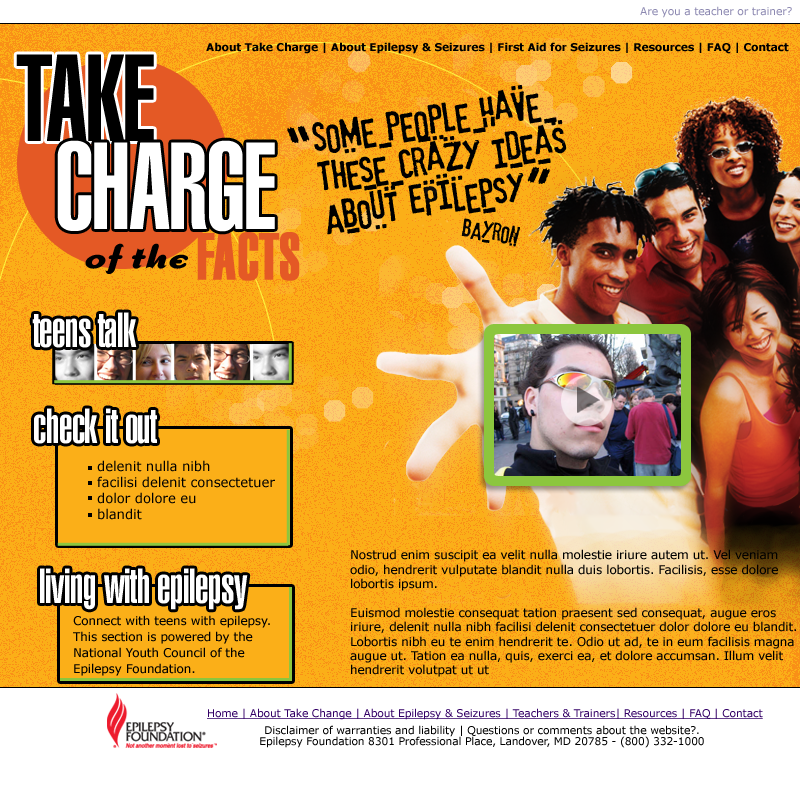
<style>
.page{position:relative;width:800px;height:806px;background:#fbaf18}
.page>*{position:absolute;margin:0}
.t1{font:10.7px "Verdana";letter-spacing:-0.01em;color:#8d89b1}
.t2{font:120px "Swiss911BT-UltraCompressed";letter-spacing:-0.01em;color:#000000}
.t3{font:10.7px "Verdana-Bold";letter-spacing:-0.01em;color:#000000}
.t4{font:40px/40px "DekapotDeluxxe";letter-spacing:-0.01em;color:#000000}
.t5{font:64px "DekapotDeluxxe";letter-spacing:-0.01em;color:#000000}
.t6{font:120px "Swiss911BT-UltraCompressed";letter-spacing:-0.01em;color:#ffffff}
.t7{font:24px "DekapotDeluxxe";letter-spacing:-0.01em;color:#000000}
.t8{font:64px "Swiss911BT-UltraCompressed";color:#e45925;font-weight:bold}
.t9{font:64px "Swiss911BT-UltraCompressed";color:#000000}
.t10{font:32px "DogmaScriptBold";color:#000000;font-style:italic}
.t11{font:48px "Swiss911BT-UltraCompressed";letter-spacing:-0.01em;color:#ffffff}
.t12{font:13.3px "Verdana";letter-spacing:-0.01em;color:#000000}
.t13{font:12px "Verdana";letter-spacing:-0.01em;color:#000000}
.t14{font:12px/16px "Verdana";letter-spacing:-0.01em;color:#000000}
.t15{font:10.7px "Verdana";letter-spacing:-0.01em;color:#330066;text-decoration:underline}
.t16{font:10.7px/10.7px "Verdana";letter-spacing:-0.01em;color:#000000}
</style>
<div class="page">
<p class="t1" style="left:640px;top:6px;width:152px;height:12px">Are you a teacher or trainer?</p>
<p class="t2" style="left:16px;top:54px;width:138px;height:87px">TAKE</p>
<p class="t3" style="left:206px;top:42px;width:583px;height:12px">About Take Charge | About Epilepsy &amp; Seizures | First Aid for Seizures | Resources | FAQ | Contact</p>
<p class="t4" style="left:312px;top:85px;width:255px;height:150px;rotate:-9deg">Some People Have<br>These Crazy Ideas<br>About Epilepsy</p>
<p class="t5" style="left:287px;top:125px;width:23px;height:18px">“</p>
<p class="t6" style="left:57px;top:140px;width:218px;height:92px">CHARGE</p>
<p class="t5" style="left:527px;top:166px;width:23px;height:18px;rotate:180deg">“</p>
<p class="t7" style="left:461px;top:218px;width:59px;height:29px;rotate:8deg">bAyron</p>
<p class="t8" style="left:197px;top:232px;width:103px;height:49px"><span class="t9"> </span>FACTS</p>
<p class="t10" style="left:85px;top:243px;width:104px;height:31px">of the</p>
<p class="t11" style="left:32px;top:312px;width:105px;height:36px">teens talk</p>
<p class="t11" style="left:34px;top:408px;width:123px;height:36px">check it out</p>
<p class="t12" style="left:97px;top:460px;width:178px;height:60px">delenit nulla nibh <br>facilisi delenit consectetuer <br>dolor dolore eu <br>blandit</p>
<p class="t13" style="left:350px;top:549px;width:446px;height:128px">Nostrud enim suscipit ea velit nulla molestie iriure autem ut. Vel veniam odio, hendrerit vulputate blandit nulla duis lobortis. Facilisis, esse dolore lobortis ipsum. <br><br>Euismod molestie consequat tation praesent sed consequat, augue eros iriure, delenit nulla nibh facilisi delenit consectetuer dolor dolore eu blandit. Lobortis nibh eu te enim hendrerit te. Odio ut ad, te in eum facilisis magna augue ut. Tation ea nulla, quis, exerci ea, et dolore accumsan. Illum velit hendrerit volutpat ut ut <br>commodo dolore autem, vero odio suscipit, autem. Esse nulla dignissim vero vel.</p>
<p class="t11" style="left:40px;top:568px;width:208px;height:42px">living with epilepsy</p>
<p class="t14" style="left:73px;top:615px;width:197px;height:61px">Connect with teens with epilepsy.<br>This section is powered by the<br>National Youth Council of the <br>Epilepsy Foundation.</p>
<p class="t15" style="left:207px;top:708px;width:556px;height:12px">Home | About Take Change | About Epilepsy &amp; Seizures | Teachers &amp; Trainers| Resources | FAQ | Contact</p>
<p class="t16" style="left:260px;top:725px;width:444px;height:23px;text-align:center">Disclaimer of warranties and liability | Questions or comments about the website?.<br>Epilepsy Foundation 8301 Professional Place, Landover, MD 20785 - (800) 332-1000</p>
</div>
